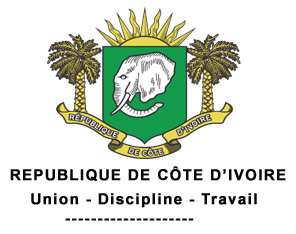
<style>
.page{position:relative;width:296px;height:234px;background:#ffffff}
.page>*{position:absolute;margin:0}
.t1{font:14.9px "Arial-BoldMT";letter-spacing:0.08em;color:#040404;font-weight:bold}
</style>
<div class="page">
<p class="t1" style="left:10px;top:166px;width:276px;height:16px">REPUBLIQUE DE CÔTE D’IVOIRE</p>
<p class="t1" style="left:31px;top:193px;width:226px;height:15px">Union - Discipline - Travail</p>
<p class="t1" style="left:65px;top:218px;width:129px;height:3px">--------------------</p>
</div>
